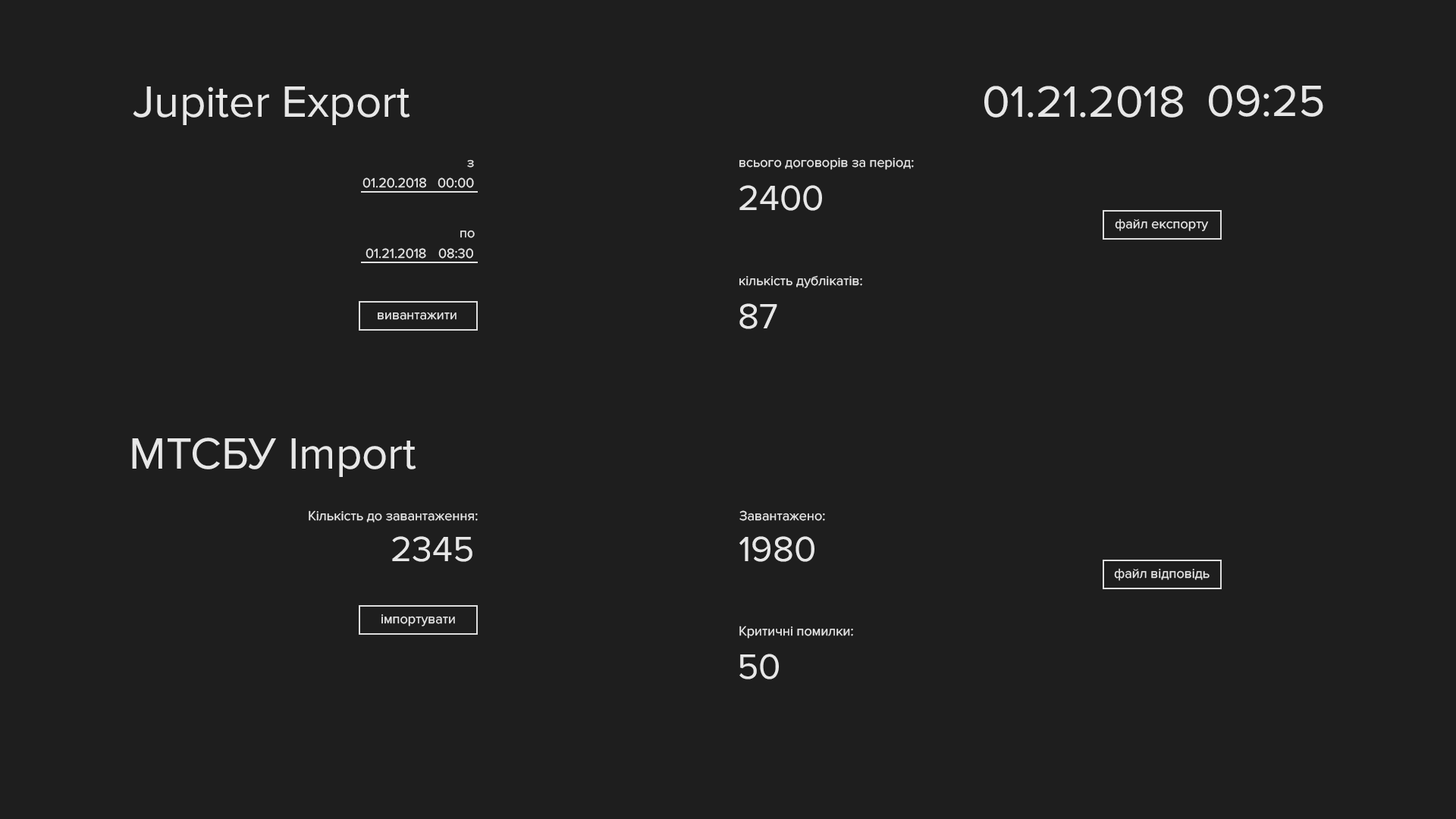
<style>
.page{position:relative;width:1456px;height:819px;background:#1e1e1e}
.page>*{position:absolute;margin:0}
.t1{font:45.5px "ProximaNova-Regular";color:#e7e7e7}
.t2{font:13.6px "ProximaNova-Regular";color:#e7e7e7}
.t3{font:36.4px "ProximaNova-Regular";color:#e7e7e7}
</style>
<div class="page">
<p class="t1" style="left:133px;top:86px;width:277px;height:39px">Jupiter Export</p>
<p class="t1" style="left:984px;top:86px;width:199px;height:32px">01.21.2018</p>
<p class="t1" style="left:1209px;top:85px;width:114px;height:32px">09:25</p>
<p class="t2" style="left:467px;top:159px;width:7px;height:9px">з</p>
<p class="t2" style="left:739px;top:158px;width:175px;height:12px">всього договорів за період:</p>
<p class="t2" style="left:362px;top:177px;width:64px;height:11px">01.20.2018</p>
<p class="t2" style="left:438px;top:177px;width:36px;height:11px">00:00</p>
<p class="t3" style="left:739px;top:185px;width:83px;height:26px">2400</p>
<p class="t2" style="left:1115px;top:218px;width:94px;height:13px">файл експорту</p>
<p class="t2" style="left:460px;top:230px;width:15px;height:8px">по</p>
<p class="t2" style="left:366px;top:248px;width:60px;height:11px">01.21.2018</p>
<p class="t2" style="left:438px;top:248px;width:35px;height:11px">08:30</p>
<p class="t2" style="left:739px;top:275px;width:123px;height:13px">кількість дублікатів:</p>
<p class="t3" style="left:739px;top:303px;width:38px;height:26px">87</p>
<p class="t2" style="left:378px;top:312px;width:79px;height:8px">вивантажити</p>
<p class="t1" style="left:132px;top:438px;width:284px;height:39px">МТСБУ Import</p>
<p class="t2" style="left:309px;top:510px;width:169px;height:12px">Кількість до завантаження:</p>
<p class="t2" style="left:739px;top:510px;width:86px;height:11px">Завантажено:</p>
<p class="t3" style="left:392px;top:536px;width:80px;height:26px">2345</p>
<p class="t3" style="left:739px;top:536px;width:75px;height:26px">1980</p>
<p class="t2" style="left:1114px;top:568px;width:96px;height:13px">файл відповідь</p>
<p class="t2" style="left:381px;top:614px;width:74px;height:12px">імпортувати</p>
<p class="t2" style="left:739px;top:626px;width:114px;height:13px">Критичні помилки:</p>
<p class="t3" style="left:739px;top:654px;width:40px;height:25px">50</p>
</div>
